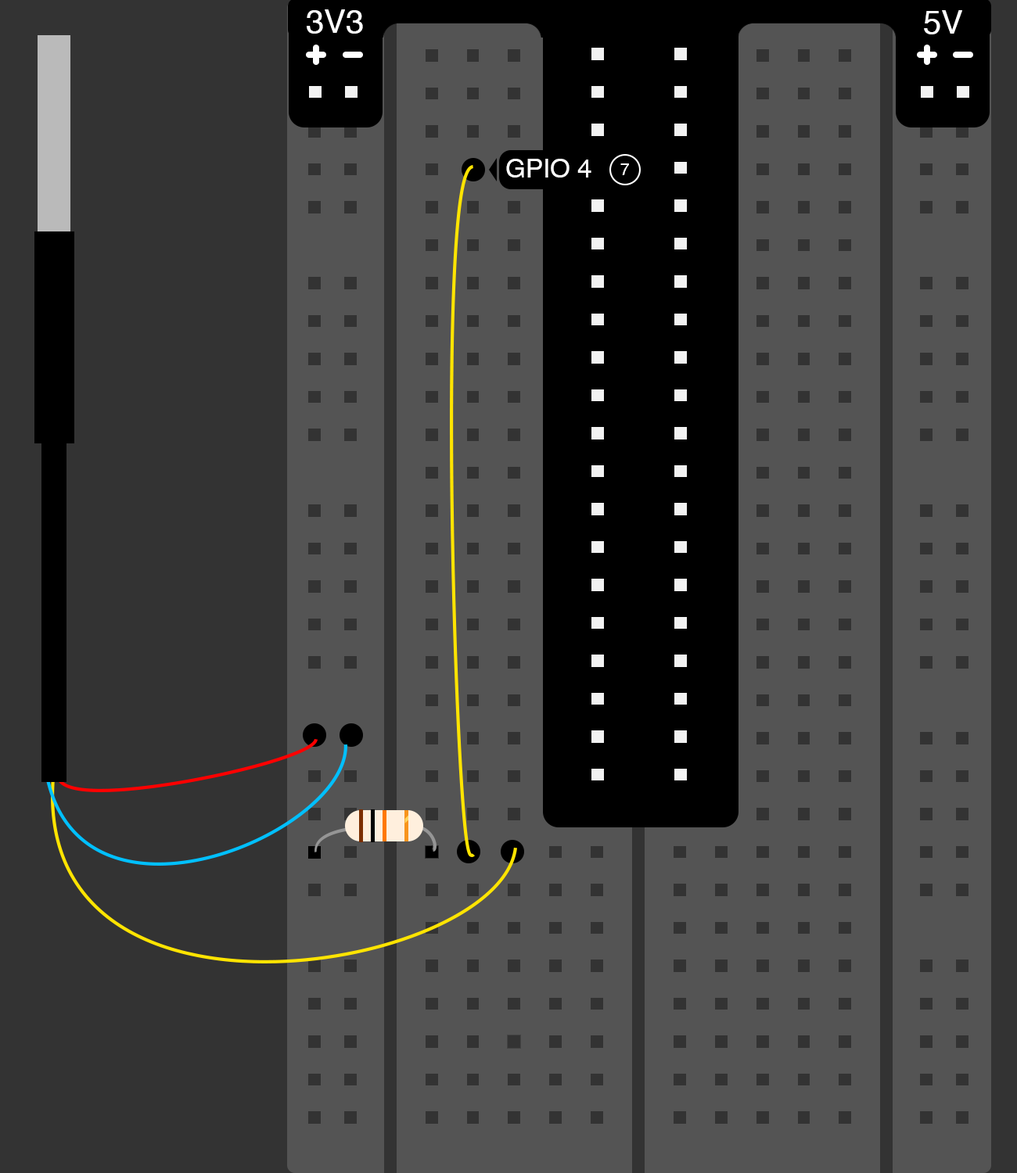
<style>
.page{position:relative;width:1017px;height:1173px;background:#545454}
.page>*{position:absolute;margin:0}
.t1{font:32.6px "Helvetica";color:#ffffff}
.t2{font:26.1px "Helvetica";color:#ffffff}
.t3{font:16.3px "Helvetica";color:#ffffff}
</style>
<div class="page">
<p class="t1" style="left:307px;top:9px;width:56px;height:25px">3V3</p>
<p class="t1" style="left:924px;top:10px;width:38px;height:24px">5V</p>
<p class="t2" style="left:506px;top:159px;width:85px;height:19px">GPIO 4</p>
<p class="t3" style="left:620px;top:163px;width:9px;height:12px">7</p>
</div>
